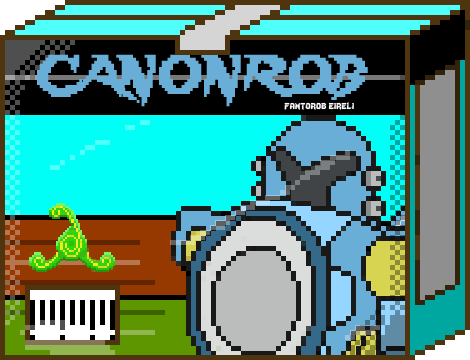
<style>
.page{position:relative;width:470px;height:360px}
.page>*{position:absolute;margin:0}
.t1{font:48.3px "Lady-Radical";color:#68aed7;scale:0.93 1}
.t2{font:12px "Lady-Radical";color:#fbfbfb}
</style>
<div class="page">
<p class="t1" style="left:37px;top:54px;width:331px;height:53px">CANONROB</p>
<p class="t2" style="left:284px;top:102px;width:70px;height:8px">fantorob eireli</p>
</div>
